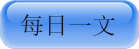
<style>
.page{position:relative;width:139px;height:49px}
.page>*{position:absolute;margin:0}
.t1{font:24px "SimSun";color:#191313}
</style>
<div class="page">
<p class="t1" style="left:21px;top:14px;width:94px;height:22px">每日一文</p>
</div>
